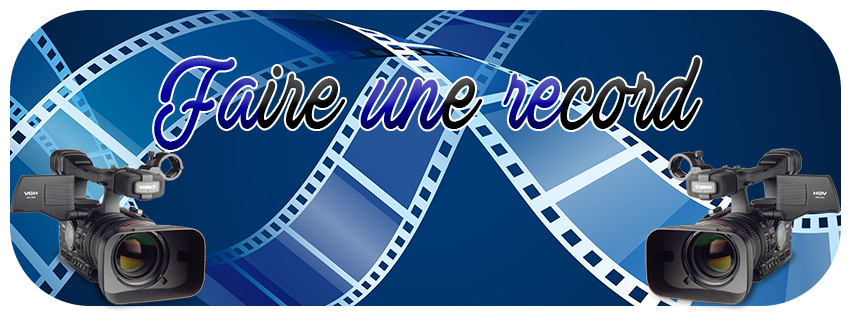
<style>
.page{position:relative;width:851px;height:315px}
.page>*{position:absolute;margin:0}
.t1{font:115.1px "ActoniaPERSONALUSE";scale:0.79 1}
</style>
<div class="page">
<p class="t1" style="left:154px;top:57px;width:547px;height:93px">Faire une record</p>
</div>
